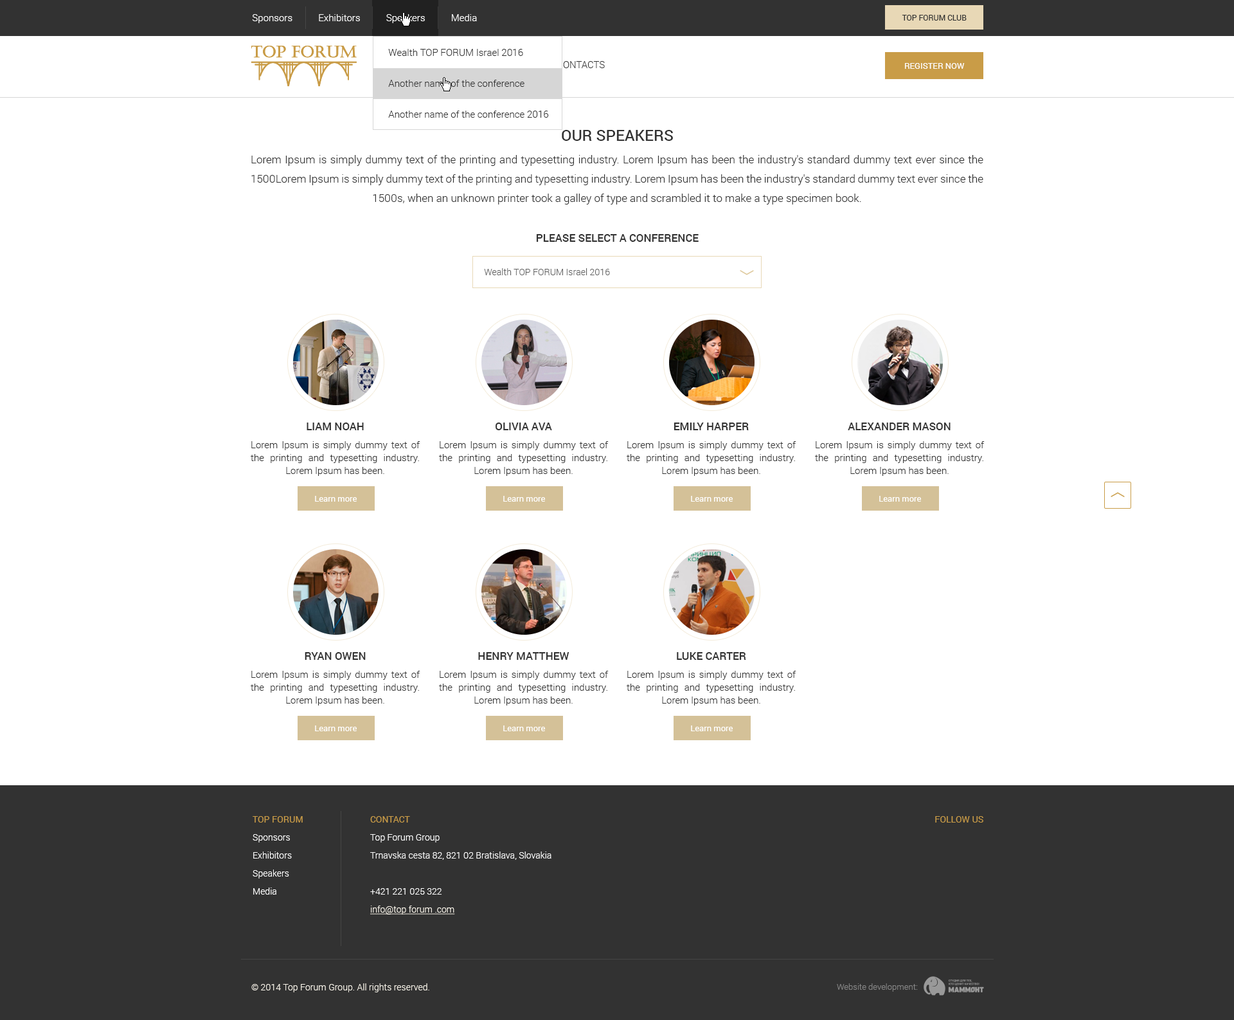
<style>
.page{position:relative;width:1234px;height:1020px;background:#ffffff}
.page>*{position:absolute;margin:0}
.t1{font:9.6px "Roboto-Light";color:#ffffff}
.t2{font:7.7px "Roboto-Regular";color:#323232}
.t3{font:9.6px/15.4px "Roboto-Light";color:#323232}
.t4{font:9.6px "Roboto-Light";color:#323232}
.t5{font:8.4px "Roboto-Regular";color:#ffffff}
.t6{font:15.4px "Roboto-Medium";color:#323232}
.t7{font:10.9px/19.3px "Roboto-Light";color:#323232}
.t8{font:10.9px "Roboto-Medium";color:#323232;text-transform:uppercase}
.t9{font:9px "Roboto-Light";color:#606060}
.t10{font:9.6px/12.9px "Roboto-Light";color:#323232}
.t11{font:10.9px/12.9px "Roboto-Medium";color:#323232;text-transform:uppercase}
.t12{font:9px/14.1px "Roboto-Light";color:#ffffff}
.t13{font:9px/14.1px "Roboto-Regular";color:#c99c47}
.t14{font:9px/14.1px "Roboto-Light";color:#f8f3e9;text-decoration:underline}
.t15{font:9px "Roboto-Regular";color:#c99c47}
.t16{font:9px "Roboto-Light";color:#f8f3e9}
.t17{font:8.4px "Roboto-Light";color:#858585}
</style>
<div class="page">
<p class="t1" style="left:252px;top:14px;width:225px;height:9px">Sponsors           Exhibitors           Speakers           Media</p>
<p class="t2" style="left:902px;top:15px;width:65px;height:6px">TOP FORUM CLUB</p>
<p class="t3" style="left:388px;top:49px;width:161px;height:69px">Wealth TOP FORUM Israel 2016<br>Another name of the conference<br>Another name of the conference 2016</p>
<p class="t4" style="left:557px;top:61px;width:48px;height:7px">CONTACTS</p>
<p class="t5" style="left:905px;top:63px;width:60px;height:6px">REGISTER NOW</p>
<p class="t6" style="left:562px;top:130px;width:111px;height:11px">OUR SPEAKERS</p>
<p class="t7" style="left:251px;top:155px;width:733px;height:49px;text-align:justify">Lorem Ipsum is simply dummy text of the printing and typesetting industry. Lorem Ipsum has been the industry's standard dummy text ever since the 1500Lorem Ipsum is simply dummy text of the printing and typesetting industry. Lorem Ipsum has been the industry's standard dummy text ever since the 1500s, when an unknown printer took a galley of type and scrambled it to make a type specimen book.</p>
<p class="t8" style="left:536px;top:234px;width:163px;height:8px">please select a conference</p>
<p class="t9" style="left:484px;top:268px;width:126px;height:7px">Wealth TOP FORUM Israel 2016</p>
<p class="t10" style="left:251px;top:422px;width:169px;height:54px;text-align:justify"><span class="t11">Liam Noah<br></span>Lorem Ipsum is simply dummy text of the printing and typesetting industry. Lorem Ipsum has been.</p>
<p class="t10" style="left:439px;top:422px;width:170px;height:54px;text-align:justify"><span class="t11">Olivia Ava<br></span>Lorem Ipsum is simply dummy text of the printing and typesetting industry. Lorem Ipsum has been.</p>
<p class="t10" style="left:627px;top:422px;width:170px;height:54px;text-align:justify"><span class="t11">Emily Harper<br></span>Lorem Ipsum is simply dummy text of the printing and typesetting industry. Lorem Ipsum has been.</p>
<p class="t10" style="left:815px;top:422px;width:170px;height:54px;text-align:justify"><span class="t11">Alexander Mason<br></span>Lorem Ipsum is simply dummy text of the printing and typesetting industry. Lorem Ipsum has been.</p>
<p class="t5" style="left:315px;top:496px;width:42px;height:5px">Learn more</p>
<p class="t5" style="left:503px;top:496px;width:42px;height:5px">Learn more</p>
<p class="t5" style="left:691px;top:496px;width:42px;height:5px">Learn more</p>
<p class="t5" style="left:879px;top:496px;width:42px;height:5px">Learn more</p>
<p class="t10" style="left:251px;top:652px;width:169px;height:53px;text-align:justify"><span class="t11">Ryan Owen<br></span>Lorem Ipsum is simply dummy text of the printing and typesetting industry. Lorem Ipsum has been.</p>
<p class="t10" style="left:439px;top:652px;width:170px;height:53px;text-align:justify"><span class="t11">Henry Matthew<br></span>Lorem Ipsum is simply dummy text of the printing and typesetting industry. Lorem Ipsum has been.</p>
<p class="t10" style="left:627px;top:652px;width:170px;height:53px;text-align:justify"><span class="t11">Luke Carter<br></span>Lorem Ipsum is simply dummy text of the printing and typesetting industry. Lorem Ipsum has been.</p>
<p class="t5" style="left:315px;top:725px;width:42px;height:6px">Learn more</p>
<p class="t5" style="left:503px;top:725px;width:42px;height:6px">Learn more</p>
<p class="t5" style="left:691px;top:725px;width:42px;height:6px">Learn more</p>
<p class="t12" style="left:253px;top:816px;width:50px;height:78px;text-align:justify"><span class="t13">TOP FORUM<br></span>Sponsors<br>Exhibitors <br>Speakers<br>Media</p>
<p class="t12" style="left:370px;top:816px;width:182px;height:98px;text-align:justify"><span class="t13">CONTACT<br></span>Top Forum Group<br>Trnavska cesta 82, 821 02 Bratislava, Slovakia<br> <br>+421 221 025 322<br><span class="t14">info@top forum .com</span></p>
<p class="t15" style="left:935px;top:816px;width:49px;height:6px">FOLLOW US</p>
<p class="t16" style="left:251px;top:983px;width:178px;height:9px">© 2014 Top Forum Group. All rights reserved.</p>
<p class="t17" style="left:837px;top:983px;width:81px;height:8px">Website development:</p>
</div>
